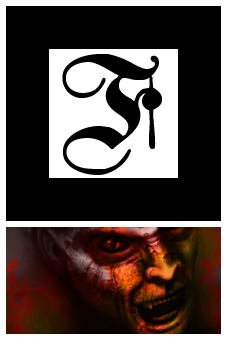
<style>
.page{position:relative;width:227px;height:340px;background:#000000}
.page>*{position:absolute;margin:0}
.t1{font:122px "TeutonicNo1-DemiBold";color:#000000;font-weight:bold}
</style>
<div class="page">
<p class="t1" style="left:62px;top:54px;width:100px;height:121px">F</p>
</div>
